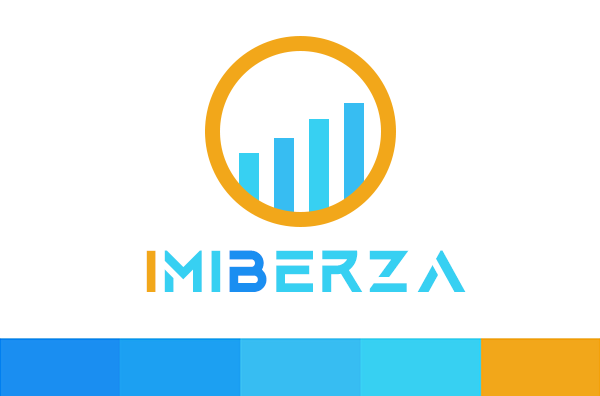
<style>
.page{position:relative;width:600px;height:396px;background:#ffffff}
.page>*{position:absolute;margin:0}
.t1{font:62.5px "AquireBold";letter-spacing:0.05em;color:#37d0f2}
.t2{font:62.5px "AquireBold";letter-spacing:0.05em;color:#f2a71a}
.t3{font:62.5px "AquireBold";letter-spacing:0.05em;color:#1a8ef1}
</style>
<div class="page">
<p class="t1" style="left:146px;top:250px;width:320px;height:42px"><span class="t2">i</span>mi<span class="t3">B</span>erza</p>
</div>
